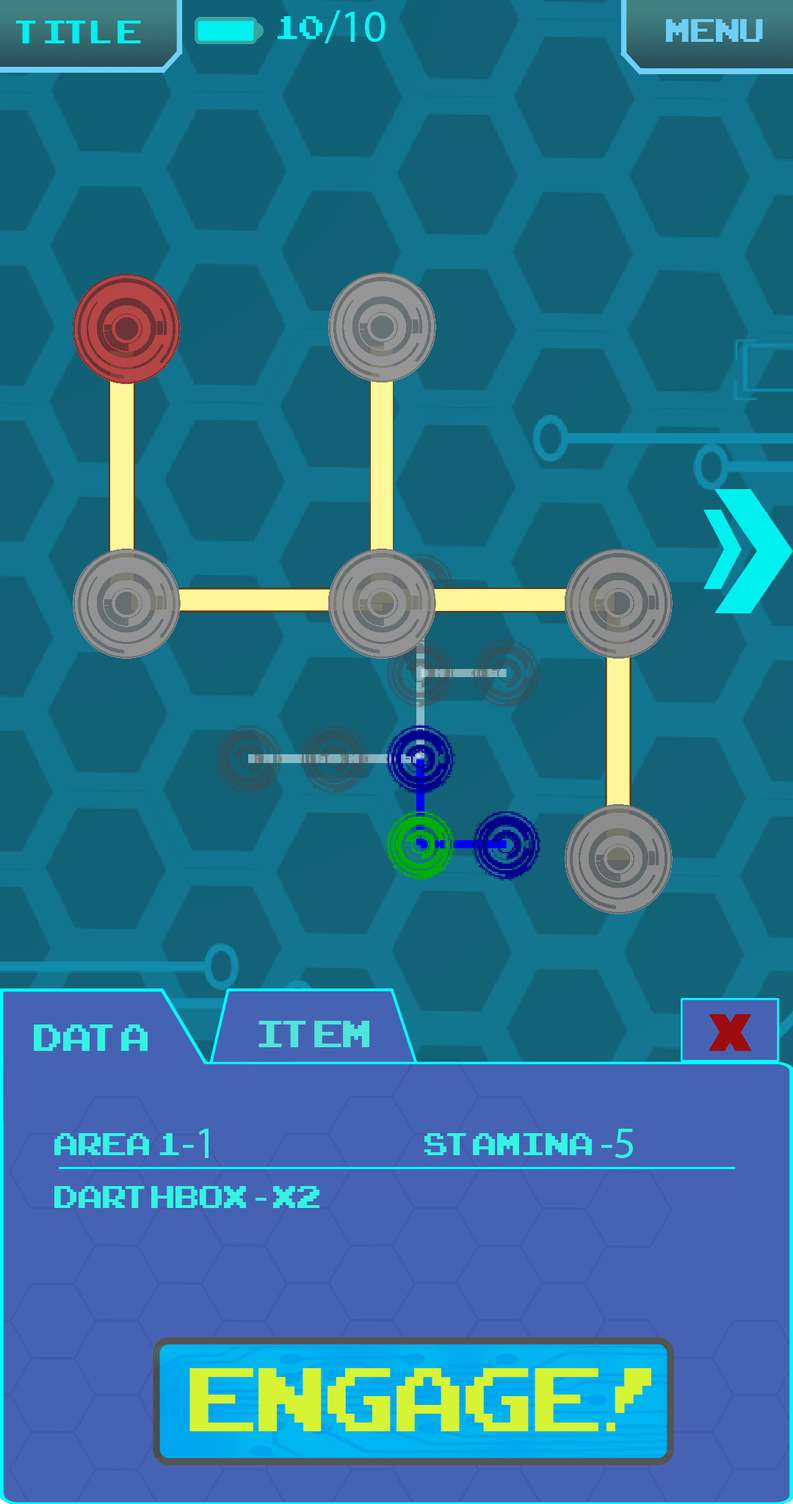
<style>
.page{position:relative;width:793px;height:1504px;background:#4663b3}
.page>*{position:absolute;margin:0}
.t1{font:45.5px "MyriadPro-Regular";color:#0af3f3}
.t2{font:45.5px "ArcadeClassic";color:#0af3f3}
.t3{font:45.5px "ArcadeClassic";color:#00f0f0}
.t4{font:44.8px "ArcadeClassic";color:#6dd0f7}
.t5{font:52.9px "ArcadeClassic";color:#34f3e3}
.t6{font:52.9px "ArcadeClassic";color:#4ee5d9}
.t7{font:44.1px "ArcadeClassic";color:#34f3e3}
.t8{font:44.1px "MyriadPro-Regular";color:#34f3e3}
.t9{font:125.4px "ArcadeClassic";color:#d6f334}
</style>
<div class="page">
<p class="t1" style="left:278px;top:10px;width:107px;height:33px"><span class="t2">10</span>/10</p>
<p class="t3" style="left:15px;top:21px;width:126px;height:22px">title</p>
<p class="t4" style="left:666px;top:19px;width:97px;height:23px">MENU</p>
<p class="t5" style="left:34px;top:1024px;width:114px;height:27px">DATA</p>
<p class="t6" style="left:258px;top:1021px;width:111px;height:26px">item</p>
<p class="t7" style="left:54px;top:1129px;width:579px;height:79px">area 1<span class="t8">-1         </span>stamina <span class="t8">-5<br></span>darthbox <span class="t8">-</span> x2</p>
<p class="t9" style="left:189px;top:1368px;width:462px;height:63px">engage!</p>
</div>
